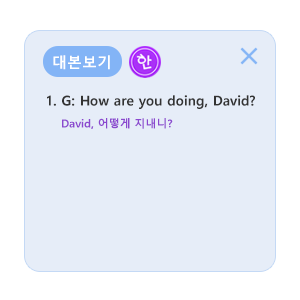
<style>
.page{position:relative;width:300px;height:300px;background:#e6edf8}
.page>*{position:absolute;margin:0}
.t1{font:15px "MalgunGothicBold";color:#ffffff}
.t2{font:13.5px/22px "MalgunGothicBold";color:#333333}
.t3{font:11px/22px "MalgunGothicBold";color:#8b48cf}
</style>
<div class="page">
<p class="t1" style="left:53px;top:55px;width:57px;height:15px">대본보기</p>
<p class="t2" style="left:47px;top:95px;width:208px;height:34px">1. G: How are you doing, David?<br>   <span class="t3"> David, 어떻게 지내니?</span></p>
</div>
